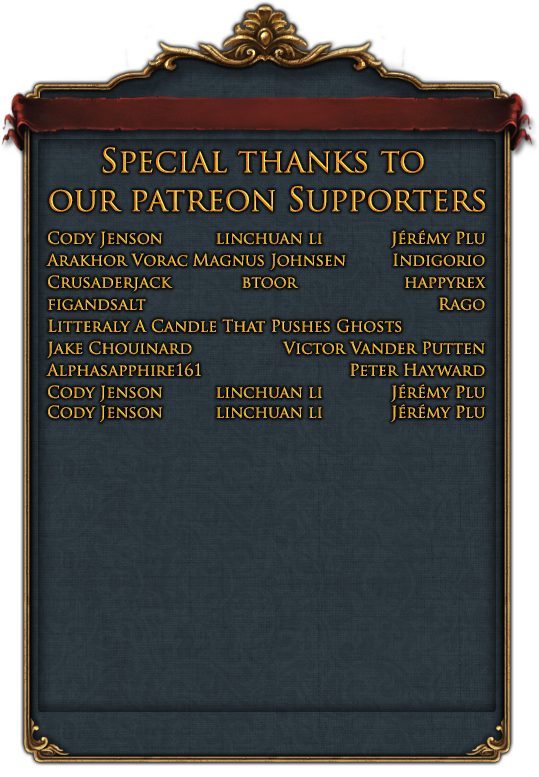
<style>
.page{position:relative;width:539px;height:777px}
.page>*{position:absolute;margin:0}
.t1{font:32.3px "TrajanPro-Regular"}
.t2{font:16px "TrajanPro-Regular"}
.t3{font:16px "TrajanPro-Regular";color:#e09e1e}
.t4{font:16px "TrajanPro-Regular";color:#e1a220}
.t5{font:16px "TrajanPro-Regular";color:#e0a01f}
</style>
<div class="page">
<p class="t1" style="left:49px;top:147px;width:436px;height:65px;text-align:center">Special thanks to <br>our patreon Supporters</p>
<p class="t2" style="left:48px;top:231px;width:114px;height:17px">Cody Jenson</p>
<p class="t3" style="left:216px;top:233px;width:106px;height:12px">linchuan li</p>
<p class="t2" style="left:391px;top:230px;width:94px;height:18px">Jérémy Plu</p>
<p class="t2" style="left:46px;top:253px;width:142px;height:14px">Arakhor Vorac</p>
<p class="t2" style="left:193px;top:253px;width:153px;height:17px">Magnus Johnsen</p>
<p class="t2" style="left:393px;top:253px;width:92px;height:14px">Indigorio</p>
<p class="t2" style="left:48px;top:275px;width:125px;height:17px">Crusaderjack</p>
<p class="t2" style="left:242px;top:277px;width:56px;height:12px">btoor</p>
<p class="t2" style="left:405px;top:277px;width:81px;height:11px">happyrex</p>
<p class="t2" style="left:48px;top:299px;width:98px;height:12px">figandsalt</p>
<p class="t4" style="left:439px;top:297px;width:46px;height:14px">Rago</p>
<p class="t5" style="left:48px;top:319px;width:354px;height:14px">Litteraly A Candle That Pushes Ghosts</p>
<p class="t2" style="left:47px;top:341px;width:145px;height:17px">Jake Chouinard</p>
<p class="t2" style="left:282px;top:341px;width:203px;height:14px">Victor Vander Putten</p>
<p class="t2" style="left:46px;top:363px;width:155px;height:14px">Alphasapphire161</p>
<p class="t2" style="left:350px;top:363px;width:135px;height:14px">Peter Hayward</p>
<p class="t2" style="left:48px;top:385px;width:114px;height:17px">Cody Jenson</p>
<p class="t3" style="left:216px;top:387px;width:106px;height:12px">linchuan li</p>
<p class="t2" style="left:391px;top:384px;width:94px;height:18px">Jérémy Plu</p>
<p class="t2" style="left:48px;top:405px;width:114px;height:17px">Cody Jenson</p>
<p class="t3" style="left:216px;top:407px;width:106px;height:12px">linchuan li</p>
<p class="t2" style="left:391px;top:404px;width:94px;height:18px">Jérémy Plu</p>
</div>
